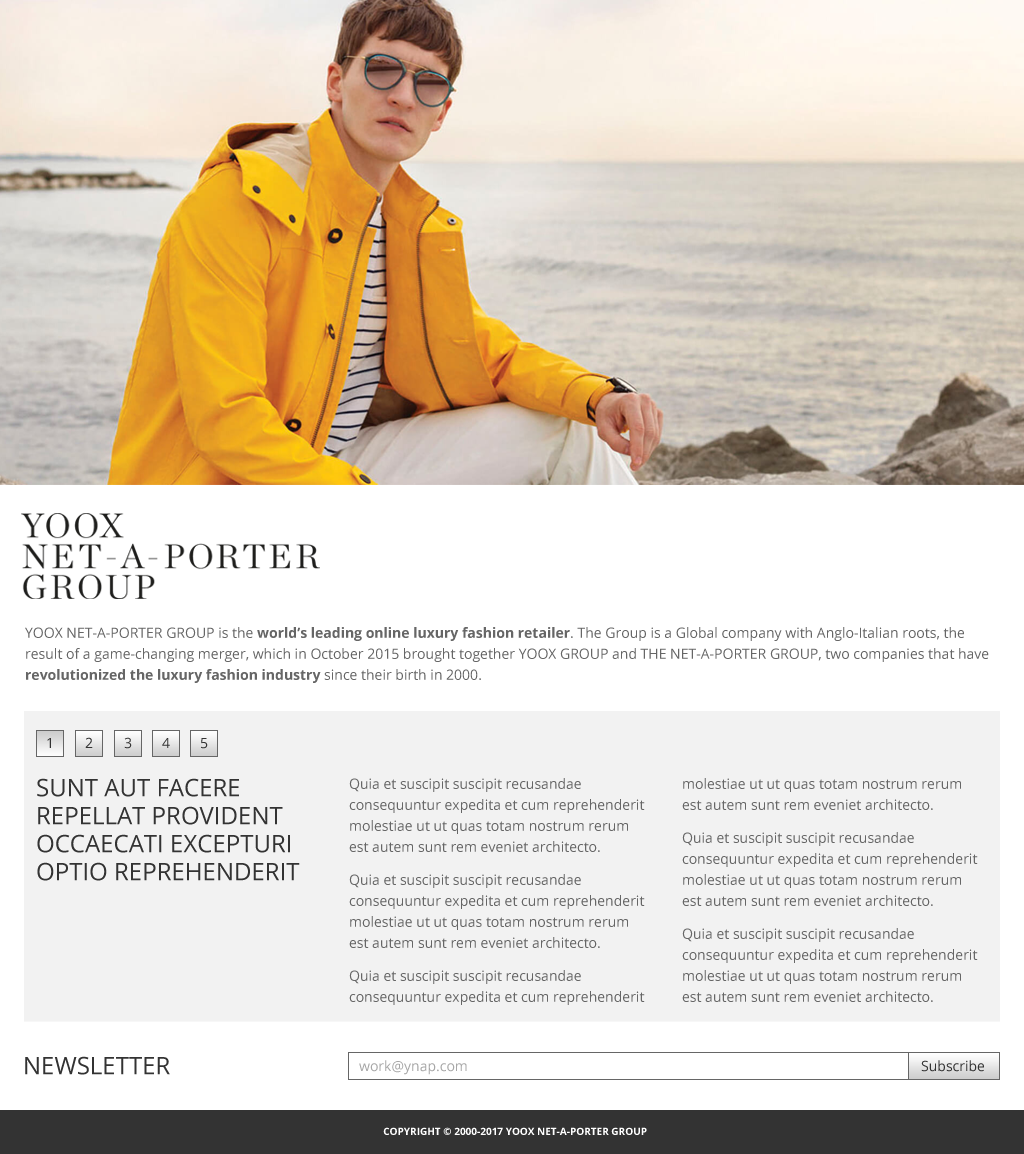
<style>
.page{position:relative;width:1024px;height:1154px;background:#ffffff}
.page>*{position:absolute;margin:0}
.t1{font:14px/21px "OpenSans";color:#666666}
.t2{font:14px/21px "OpenSans-Bold";color:#666666}
.t3{font:14px "OpenSans";color:#333333}
.t4{font:24px/28px "OpenSans";color:#333333;text-transform:uppercase}
.t5{font:24px "OpenSans";color:#333333;text-transform:uppercase}
.t6{font:14px "OpenSans";color:#a7a7a7}
.t7{font:10px "OpenSans-Bold";color:#ffffff}
</style>
<div class="page">
<p class="t1" style="left:25px;top:627px;width:964px;height:56px">YOOX NET-A-PORTER GROUP is the <span class="t2">world’s leading online luxury fashion retailer</span>. The Group is a Global company with Anglo-Italian roots, the result of a game-changing merger, which in October 2015 brought together YOOX GROUP and THE NET-A-PORTER GROUP, two companies that have <span class="t2">revolutionized the luxury fashion industry </span>since their birth in 2000.</p>
<p class="t3" style="left:85px;top:737px;width:8px;height:11px">2</p>
<p class="t3" style="left:124px;top:737px;width:8px;height:12px">3</p>
<p class="t3" style="left:47px;top:738px;width:4px;height:10px">1</p>
<p class="t3" style="left:162px;top:738px;width:8px;height:10px">4</p>
<p class="t3" style="left:201px;top:738px;width:7px;height:11px">5</p>
<p class="t4" style="left:37px;top:778px;width:263px;height:103px">sunt aut facere repellat provident occaecati excepturi optio reprehenderit</p>
<p class="t1" style="left:349px;top:778px;width:296px;height:227px">Quia et suscipit suscipit recusandae consequuntur expedita et cum reprehenderit molestiae ut ut quas totam nostrum rerum est autem sunt rem eveniet architecto. <br>Quia et suscipit suscipit recusandae consequuntur expedita et cum reprehenderit molestiae ut ut quas totam nostrum rerum est autem sunt rem eveniet architecto. <br>Quia et suscipit suscipit recusandae consequuntur expedita et cum reprehenderit</p>
<p class="t1" style="left:682px;top:778px;width:296px;height:224px">molestiae ut ut quas totam nostrum rerum est autem sunt rem eveniet architecto. <br>Quia et suscipit suscipit recusandae consequuntur expedita et cum reprehenderit molestiae ut ut quas totam nostrum rerum est autem sunt rem eveniet architecto. <br>Quia et suscipit suscipit recusandae consequuntur expedita et cum reprehenderit molestiae ut ut quas totam nostrum rerum est autem sunt rem eveniet architecto.</p>
<p class="t5" style="left:25px;top:1056px;width:145px;height:19px">newsletter</p>
<p class="t6" style="left:359px;top:1060px;width:108px;height:15px">work@ynap.com</p>
<p class="t3" style="left:921px;top:1060px;width:63px;height:12px">Subscribe</p>
<p class="t7" style="left:383px;top:1127px;width:264px;height:8px">COPYRIGHT © 2000-2017 YOOX NET-A-PORTER GROUP</p>
</div>
